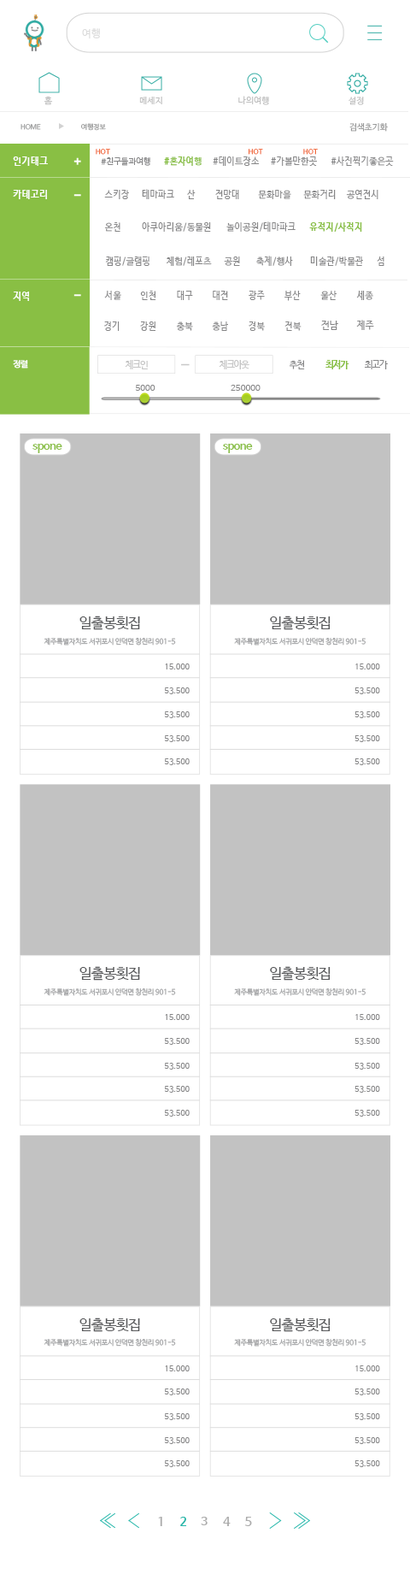
<style>
.page{position:relative;width:410px;height:1580px;background:#ffffff}
.page>*{position:absolute;margin:0}
.t1{font:10.3px "NanumBarunGothic";letter-spacing:0.025em;color:#dcdcdc}
.t2{font:8.5px "NanumBarunGothic";letter-spacing:0.025em;color:#bfbfbf}
.t3{font:6.8px "NanumBarunGothic";color:#999a9a}
.t4{font:8.5px "NanumBarunGothic";color:#999a9a}
.t5{font:6.8px "NanumBarunGothic";letter-spacing:0.025em}
.t6{font:9.8px "NanumBarunGothicBold";letter-spacing:0.025em;color:#ffffff}
.t7{font:8.3px "NanumBarunGothic";letter-spacing:0.025em;color:#868687}
.t8{font:9px "NanumBarunGothicBold";letter-spacing:0.025em;color:#89bf44}
.t9{font:9px "NanumBarunGothic";letter-spacing:0.025em;color:#868687}
.t10{font:9.4px "NanumBarunGothicBold";letter-spacing:0.025em;color:#ffffff}
.t11{font:9.4px "NanumBarunGothic";letter-spacing:0.025em;color:#868687}
.t12{font:8.8px "NanumBarunGothicBold";letter-spacing:-0.075em;color:#ffffff}
.t13{font:9px "NanumBarunGothic";letter-spacing:-0.075em;color:#c4c4c4}
.t14{font:9px "NanumBarunGothic";letter-spacing:-0.075em;color:#868687}
.t15{font:9px "NanumBarunGothicBold";letter-spacing:-0.075em;color:#89bf44}
.t16{font:8.1px "NanumBarunGothic";letter-spacing:0.025em;color:#868687}
.t17{font:11.5px "NanumBarunGothicBold";letter-spacing:-0.05em;color:#89bf44}
.t18{font:14.2px "NanumBarunGothic";letter-spacing:-0.025em;color:#58595b}
.t19{font:7.2px "NanumBarunGothic";letter-spacing:-0.025em;color:#a3a4a6}
.t20{font:7.9px "NanumBarunGothic";color:#868687}
.t21{font:12px "NanumBarunGothicBold";letter-spacing:-0.05em;color:#ababab}
.t22{font:12px "NanumBarunGothicBold";letter-spacing:-0.05em;color:#25b7aa}
</style>
<div class="page">
<p class="t1" style="left:82px;top:28px;width:18px;height:10px">여행</p>
<p class="t2" style="left:44px;top:96px;width:9px;height:9px">홈</p>
<p class="t2" style="left:139px;top:97px;width:23px;height:7px">메세지</p>
<p class="t2" style="left:238px;top:96px;width:31px;height:9px">나의여행</p>
<p class="t2" style="left:349px;top:97px;width:15px;height:8px">설정</p>
<p class="t3" style="left:21px;top:124px;width:20px;height:6px">HOME</p>
<p class="t3" style="left:81px;top:123px;width:25px;height:8px">여행정보</p>
<p class="t4" style="left:350px;top:122px;width:38px;height:10px">검색초기화</p>
<p class="t5" style="left:96px;top:149px;width:14px;height:6px">HOT</p>
<p class="t5" style="left:249px;top:149px;width:14px;height:6px">HOT</p>
<p class="t5" style="left:303px;top:149px;width:15px;height:6px">HOT</p>
<p class="t6" style="left:13px;top:156px;width:35px;height:10px">인기태그</p>
<p class="t6" style="left:13px;top:156px;width:35px;height:10px">인기태그</p>
<p class="t7" style="left:101px;top:157px;width:49px;height:9px">#친구들과여행</p>
<p class="t8" style="left:164px;top:156px;width:38px;height:10px">#혼자여행</p>
<p class="t9" style="left:213px;top:156px;width:47px;height:10px">#데이트장소</p>
<p class="t9" style="left:271px;top:156px;width:46px;height:10px">#가볼만한곳</p>
<p class="t9" style="left:331px;top:156px;width:63px;height:10px">#사진찍기좋은곳</p>
<p class="t6" style="left:13px;top:190px;width:34px;height:9px">카테고리</p>
<p class="t9" style="left:104px;top:190px;width:25px;height:9px">스키장</p>
<p class="t9" style="left:142px;top:189px;width:32px;height:10px">테마파크</p>
<p class="t9" style="left:187px;top:190px;width:9px;height:9px">산</p>
<p class="t9" style="left:215px;top:190px;width:24px;height:9px">전망대</p>
<p class="t9" style="left:258px;top:190px;width:33px;height:9px">문화마을</p>
<p class="t9" style="left:303px;top:190px;width:33px;height:9px">문화거리</p>
<p class="t9" style="left:346px;top:190px;width:33px;height:9px">공연전시</p>
<p class="t9" style="left:227px;top:221px;width:69px;height:11px">놀이공원/테마파크</p>
<p class="t9" style="left:104px;top:222px;width:17px;height:10px">온천</p>
<p class="t9" style="left:142px;top:222px;width:69px;height:10px">아쿠아리움/동물원</p>
<p class="t8" style="left:309px;top:222px;width:53px;height:10px">유적지/사적지</p>
<p class="t9" style="left:105px;top:256px;width:45px;height:10px">캠핑/글램핑</p>
<p class="t9" style="left:166px;top:256px;width:46px;height:10px">체험/레포츠</p>
<p class="t9" style="left:224px;top:256px;width:16px;height:10px">공원</p>
<p class="t9" style="left:256px;top:256px;width:37px;height:10px">축제/행사</p>
<p class="t9" style="left:310px;top:256px;width:53px;height:10px">미술관/박물관</p>
<p class="t9" style="left:377px;top:256px;width:8px;height:10px">섬</p>
<p class="t10" style="left:13px;top:291px;width:16px;height:10px">지역</p>
<p class="t9" style="left:104px;top:291px;width:17px;height:9px">서울</p>
<p class="t9" style="left:140px;top:291px;width:16px;height:9px">인천</p>
<p class="t9" style="left:177px;top:291px;width:16px;height:9px">대구</p>
<p class="t9" style="left:213px;top:291px;width:15px;height:9px">대전</p>
<p class="t9" style="left:249px;top:291px;width:16px;height:9px">광주</p>
<p class="t9" style="left:285px;top:291px;width:16px;height:10px">부산</p>
<p class="t9" style="left:321px;top:291px;width:16px;height:9px">울산</p>
<p class="t9" style="left:356px;top:291px;width:18px;height:9px">세종</p>
<p class="t9" style="left:104px;top:321px;width:16px;height:10px">경기</p>
<p class="t9" style="left:140px;top:321px;width:16px;height:10px">강원</p>
<p class="t9" style="left:176px;top:321px;width:17px;height:10px">충북</p>
<p class="t9" style="left:212px;top:321px;width:16px;height:10px">충남</p>
<p class="t9" style="left:249px;top:321px;width:16px;height:10px">경북</p>
<p class="t9" style="left:285px;top:321px;width:17px;height:10px">전북</p>
<p class="t11" style="left:321px;top:321px;width:17px;height:9px">전남</p>
<p class="t11" style="left:356px;top:320px;width:18px;height:10px">제주</p>
<p class="t12" style="left:13px;top:360px;width:15px;height:8px">정렬</p>
<p class="t13" style="left:125px;top:360px;width:23px;height:9px">체크인</p>
<p class="t13" style="left:219px;top:360px;width:31px;height:9px">체크아웃</p>
<p class="t14" style="left:289px;top:360px;width:16px;height:9px">추천</p>
<p class="t15" style="left:326px;top:360px;width:24px;height:9px">최저가</p>
<p class="t14" style="left:365px;top:360px;width:23px;height:9px">최고가</p>
<p class="t16" style="left:135px;top:385px;width:21px;height:6px">5000</p>
<p class="t16" style="left:231px;top:385px;width:30px;height:6px">250000</p>
<p class="t17" style="left:32px;top:444px;width:30px;height:9px">spone</p>
<p class="t17" style="left:223px;top:444px;width:30px;height:9px">spone</p>
<p class="t18" style="left:79px;top:615px;width:61px;height:15px">일출봉횟집</p>
<p class="t18" style="left:270px;top:615px;width:61px;height:15px">일출봉횟집</p>
<p class="t19" style="left:44px;top:638px;width:132px;height:7px">제주특별자치도 서귀포시 안덕면 창천리 901-5</p>
<p class="t19" style="left:234px;top:638px;width:132px;height:7px">제주특별자치도 서귀포시 안덕면 창천리 901-5</p>
<p class="t20" style="left:165px;top:663px;width:25px;height:6px">15.000</p>
<p class="t20" style="left:356px;top:663px;width:24px;height:6px">15.000</p>
<p class="t20" style="left:164px;top:687px;width:26px;height:7px">53.500</p>
<p class="t20" style="left:355px;top:687px;width:25px;height:7px">53.500</p>
<p class="t20" style="left:164px;top:711px;width:26px;height:7px">53.500</p>
<p class="t20" style="left:355px;top:711px;width:25px;height:7px">53.500</p>
<p class="t20" style="left:164px;top:735px;width:26px;height:7px">53.500</p>
<p class="t20" style="left:355px;top:735px;width:25px;height:7px">53.500</p>
<p class="t20" style="left:164px;top:758px;width:26px;height:7px">53.500</p>
<p class="t20" style="left:355px;top:758px;width:25px;height:7px">53.500</p>
<p class="t18" style="left:79px;top:966px;width:61px;height:14px">일출봉횟집</p>
<p class="t18" style="left:270px;top:966px;width:61px;height:14px">일출봉횟집</p>
<p class="t19" style="left:44px;top:988px;width:132px;height:8px">제주특별자치도 서귀포시 안덕면 창천리 901-5</p>
<p class="t19" style="left:234px;top:988px;width:132px;height:8px">제주특별자치도 서귀포시 안덕면 창천리 901-5</p>
<p class="t20" style="left:165px;top:1014px;width:25px;height:6px">15.000</p>
<p class="t20" style="left:356px;top:1014px;width:24px;height:6px">15.000</p>
<p class="t20" style="left:164px;top:1038px;width:26px;height:7px">53.500</p>
<p class="t20" style="left:355px;top:1038px;width:25px;height:7px">53.500</p>
<p class="t20" style="left:164px;top:1062px;width:26px;height:7px">53.500</p>
<p class="t20" style="left:355px;top:1062px;width:25px;height:7px">53.500</p>
<p class="t20" style="left:164px;top:1086px;width:26px;height:6px">53.500</p>
<p class="t20" style="left:355px;top:1086px;width:25px;height:6px">53.500</p>
<p class="t20" style="left:164px;top:1109px;width:26px;height:7px">53.500</p>
<p class="t20" style="left:355px;top:1109px;width:25px;height:7px">53.500</p>
<p class="t18" style="left:79px;top:1317px;width:61px;height:15px">일출봉횟집</p>
<p class="t18" style="left:270px;top:1317px;width:61px;height:15px">일출봉횟집</p>
<p class="t19" style="left:44px;top:1339px;width:132px;height:7px">제주특별자치도 서귀포시 안덕면 창천리 901-5</p>
<p class="t19" style="left:234px;top:1339px;width:132px;height:7px">제주특별자치도 서귀포시 안덕면 창천리 901-5</p>
<p class="t20" style="left:165px;top:1365px;width:25px;height:6px">15.000</p>
<p class="t20" style="left:356px;top:1365px;width:24px;height:6px">15.000</p>
<p class="t20" style="left:164px;top:1388px;width:26px;height:7px">53.500</p>
<p class="t20" style="left:355px;top:1388px;width:25px;height:7px">53.500</p>
<p class="t20" style="left:164px;top:1413px;width:26px;height:7px">53.500</p>
<p class="t20" style="left:355px;top:1413px;width:25px;height:7px">53.500</p>
<p class="t20" style="left:164px;top:1437px;width:26px;height:7px">53.500</p>
<p class="t20" style="left:355px;top:1437px;width:25px;height:7px">53.500</p>
<p class="t20" style="left:164px;top:1460px;width:26px;height:7px">53.500</p>
<p class="t20" style="left:355px;top:1460px;width:25px;height:7px">53.500</p>
<p class="t21" style="left:158px;top:1516px;width:4px;height:10px">1</p>
<p class="t22" style="left:180px;top:1516px;width:7px;height:10px">2</p>
<p class="t21" style="left:201px;top:1516px;width:7px;height:9px">3</p>
<p class="t21" style="left:223px;top:1516px;width:8px;height:10px">4</p>
<p class="t21" style="left:245px;top:1516px;width:7px;height:10px">5</p>
</div>
